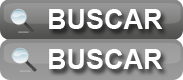
<style>
.page{position:relative;width:183px;height:80px}
.page>*{position:absolute;margin:0}
.t1{font:27px "Arial-BoldMT";color:#ffffff}
</style>
<div class="page">
<p class="t1" style="left:49px;top:9px;width:114px;height:20px">BUSCAR</p>
<p class="t1" style="left:49px;top:49px;width:114px;height:20px">BUSCAR</p>
</div>
